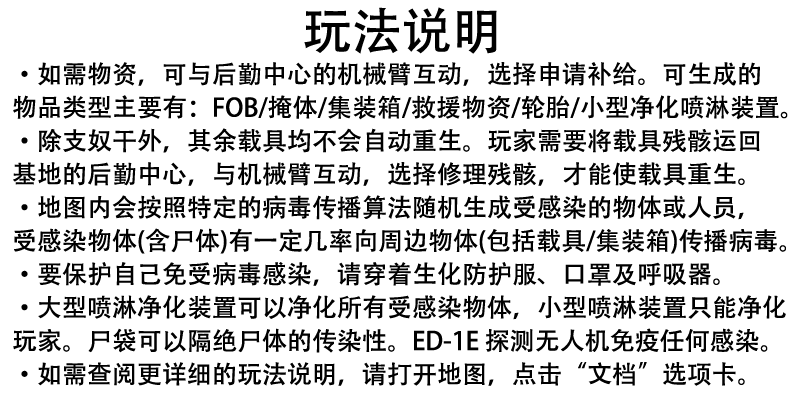
<style>
.page{position:relative;width:800px;height:400px;background:#ffffff}
.page>*{position:absolute;margin:0}
.t1{font:50px "AdobeHeitiStd-Regular";color:#000000}
.t2{font:25px/33.3px "AdobeHeitiStd-Regular";color:#000000}
</style>
<div class="page">
<p class="t1" style="left:304px;top:7px;width:193px;height:47px">玩法说明</p>
<p class="t2" style="left:13px;top:62px;width:775px;height:324px">·如需物资，可与后勤中心的机械臂互动，选择申请补给。可生成的<br>物品类型主要有：FOB/掩体/集装箱/救援物资/轮胎/小型净化喷淋装置。<br>·除支奴干外，其余载具均不会自动重生。玩家需要将载具残骸运回<br>基地的后勤中心，与机械臂互动，选择修理残骸，才能使载具重生。<br>·地图内会按照特定的病毒传播算法随机生成受感染的物体或人员，<br>受感染物体(含尸体)有一定几率向周边物体(包括载具/集装箱)传播病毒。<br>·要保护自己免受病毒感染，请穿着生化防护服、口罩及呼吸器。<br>·大型喷淋净化装置可以净化所有受感染物体，小型喷淋装置只能净化<br>玩家。尸袋可以隔绝尸体的传染性。ED-1E 探测无人机免疫任何感染。<br>·如需查阅更详细的玩法说明，请打开地图，点击“文档”选项卡。</p>
</div>
